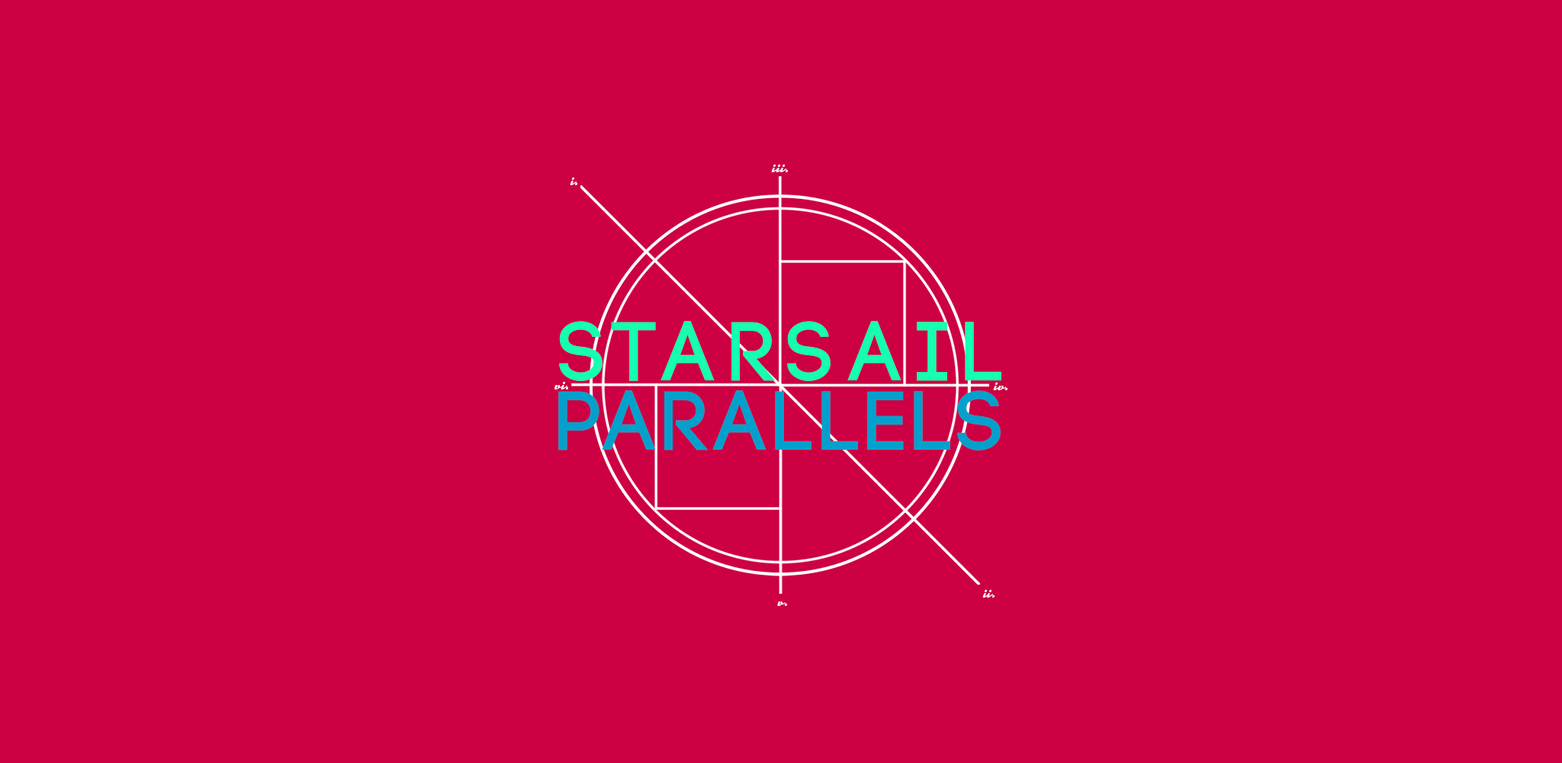
<style>
.page{position:relative;width:1562px;height:763px;background:#cc0042}
.page>*{position:absolute;margin:0}
.t1{font:16.8px "Kinescope";color:#ffffff}
.t2{font:83.8px "Code-Bold";letter-spacing:0.17em;color:#14ffb1}
.t3{font:83.8px "Code-Bold";letter-spacing:0.075em;color:#02a0cc}
</style>
<div class="page">
<p class="t1" style="left:771px;top:164px;width:17px;height:8px">iii.</p>
<p class="t1" style="left:570px;top:177px;width:7px;height:8px">i.</p>
<p class="t2" style="left:559px;top:321px;width:442px;height:60px">starsail</p>
<p class="t1" style="left:554px;top:381px;width:14px;height:9px">vi.</p>
<p class="t1" style="left:993px;top:382px;width:14px;height:8px">iv.</p>
<p class="t3" style="left:558px;top:390px;width:443px;height:61px">parallels</p>
<p class="t1" style="left:982px;top:590px;width:13px;height:8px">ii.</p>
<p class="t1" style="left:777px;top:602px;width:10px;height:4px">v.</p>
</div>
